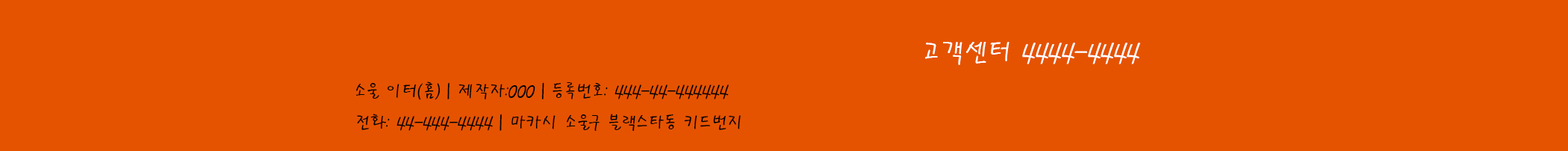
<style>
.page{position:relative;width:1568px;height:151px;background:#e55300}
.page>*{position:absolute;margin:0}
.t1{font:26.9px "PyunjiR-HM";color:#ffffff}
.t2{font:17.9px "PyunjiR-HM";color:#010101}
</style>
<div class="page">
<p class="t1" style="left:925px;top:42px;width:215px;height:23px">고객센터 4444-4444</p>
<p class="t2" style="left:356px;top:81px;width:385px;height:50px">소울 이터(홈) | 제작자:000 | 등록번호: 444-44-444444<br>전화: 44-444-4444 | 마카시 소울구 블랙스타동 키드번지</p>
</div>
